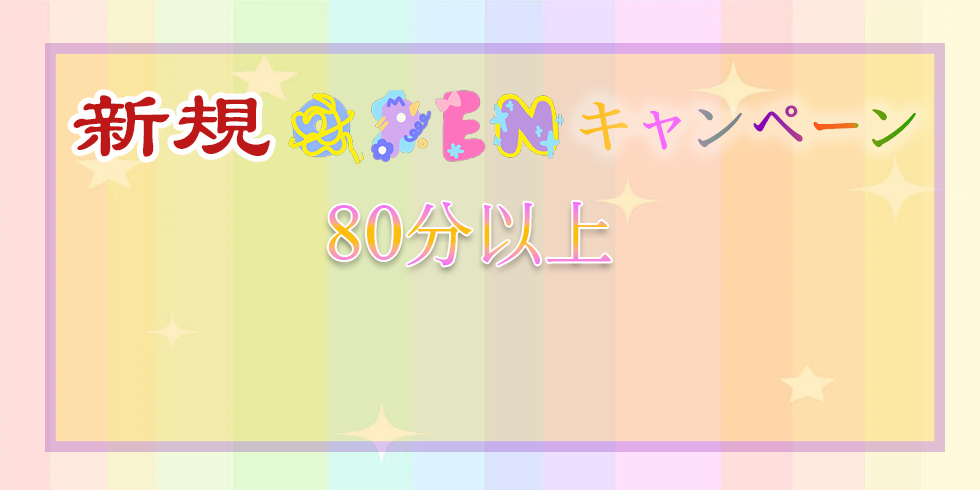
<style>
.page{position:relative;width:980px;height:490px}
.page>*{position:absolute;margin:0}
.t1{font:100px "STBaoliSC-Regular";color:#be1717}
.t2{font:58px "SimSong-Bold"}
.t3{font:70px "SimSong-Regular"}
.t4{font:80px "TimesNewRomanPSMT"}
</style>
<div class="page">
<p class="t1" style="left:73px;top:95px;width:197px;height:62px">新規</p>
<p class="t2" style="left:580px;top:102px;width:336px;height:49px">キャンペーン</p>
<p class="t3" style="left:328px;top:201px;width:283px;height:65px"><span class="t4">80</span>分以上</p>
</div>
